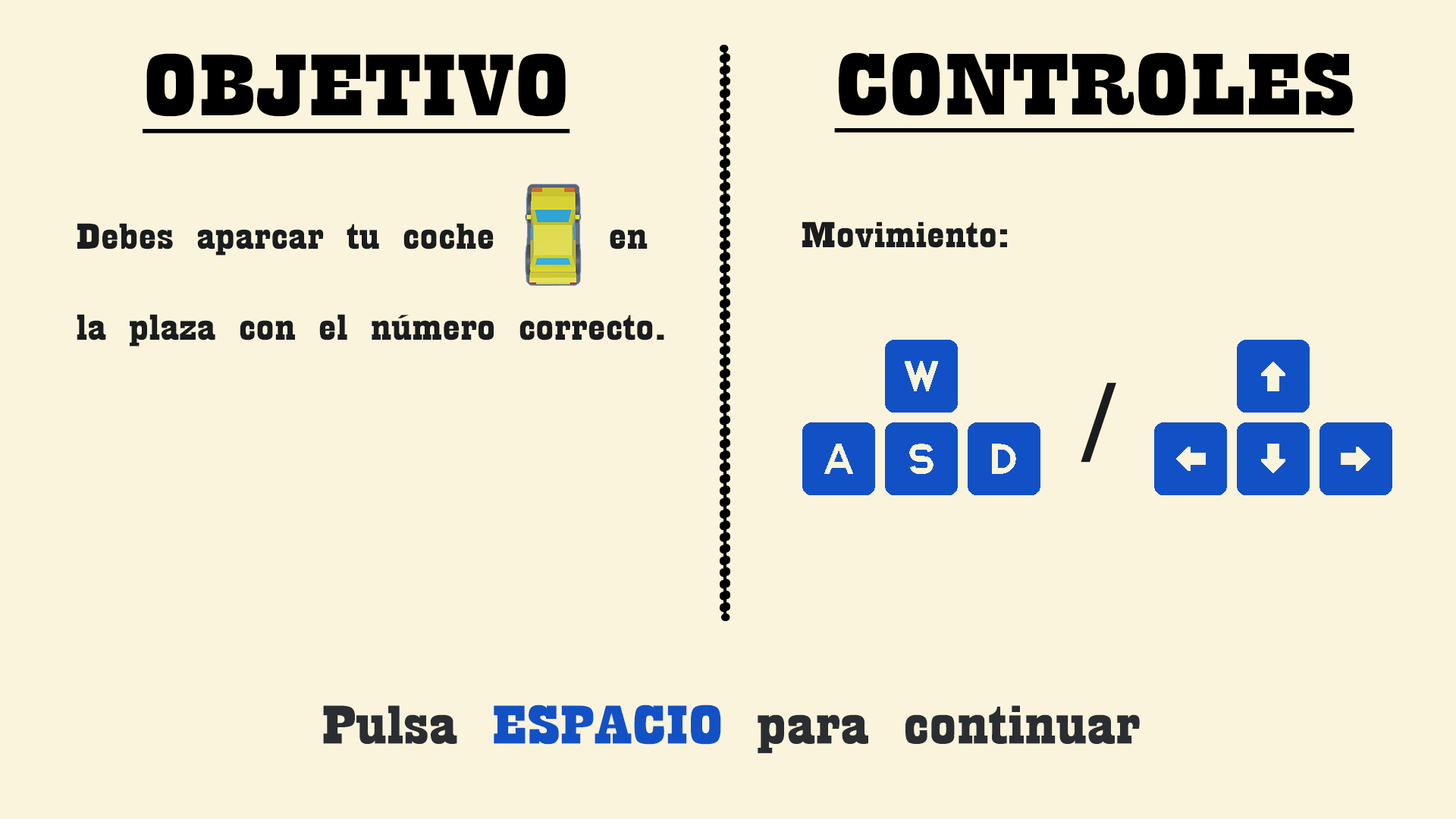
<style>
.page{position:relative;width:1456px;height:819px;background:#fbf4dd}
.page>*{position:absolute;margin:0}
.t1{font:91px "Playbill";color:#000000;text-decoration:underline;scale:2 1}
.t2{font:37.9px "Playbill";color:#1a1c1e;scale:2 1}
.t3{font:94.8px "Playbill";color:#1a1c1e;scale:1.2 1}
.t4{font:56.9px "Playbill";color:#2a2d31;scale:2 1}
.t5{font:56.9px "Playbill";color:#1251c5;scale:2 1}
</style>
<div class="page">
<p class="t1" style="left:143px;top:53px;width:427px;height:80px">OBJETIVO</p>
<p class="t1" style="left:834px;top:52px;width:520px;height:81px">CONTROLES</p>
<p class="t2" style="left:802px;top:221px;width:205px;height:27px">Movimiento:</p>
<p class="t2" style="left:77px;top:223px;width:587px;height:124px">Debes aparcar tu coche     en<br>la plaza con el número correcto.</p>
<p class="t3" style="left:1081px;top:382px;width:35px;height:81px">/</p>
<p class="t4" style="left:323px;top:704px;width:817px;height:50px">Pulsa<span class="t5"> ESPACIO </span>para continuar</p>
</div>
